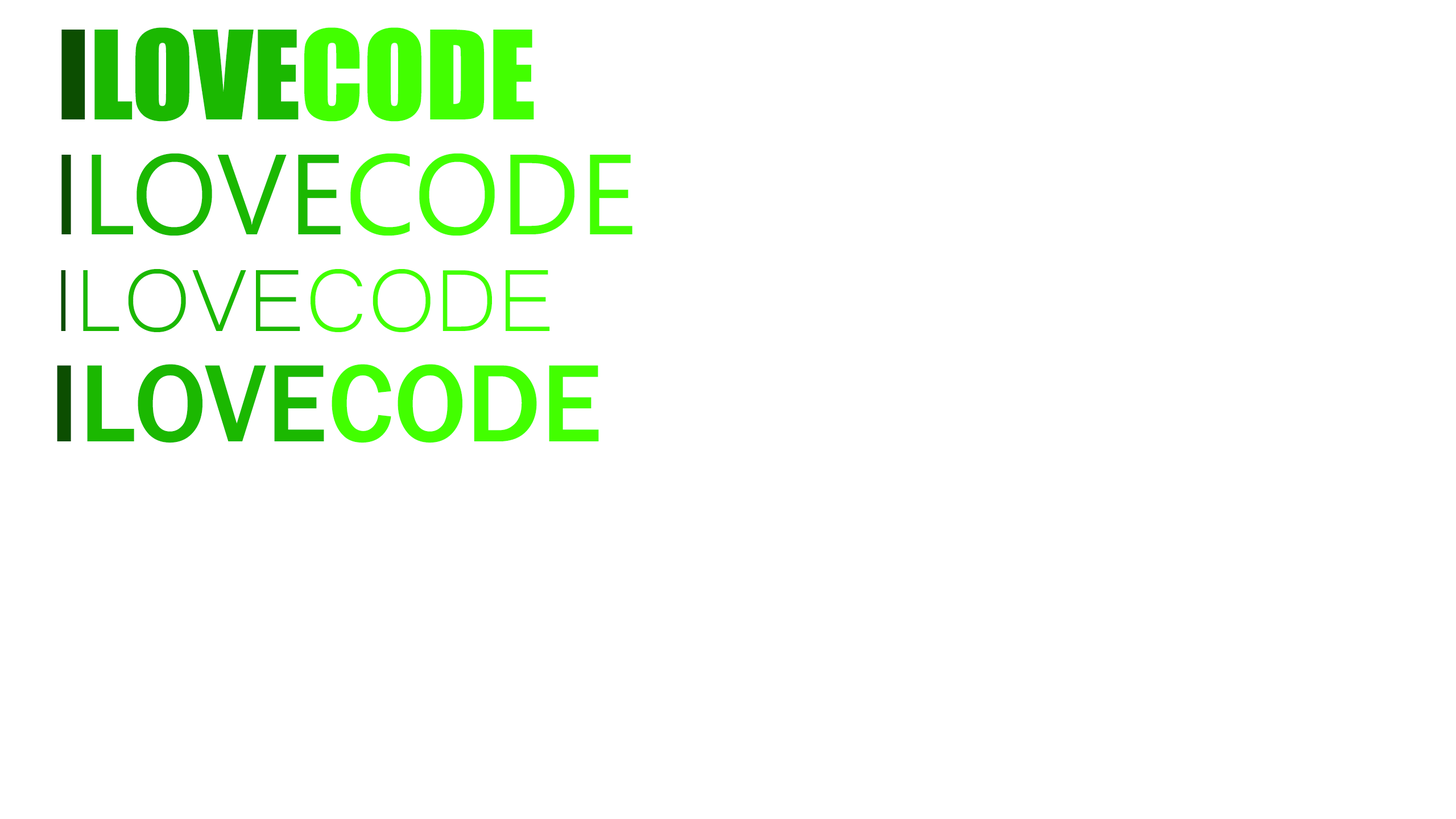
<style>
.page{position:relative;width:1456px;height:819px;background:#ffffff}
.page>*{position:absolute;margin:0}
.t1{font:113.7px "Impact";color:#1bb801;text-transform:uppercase}
.t2{font:113.7px "Impact";color:#0c4e01;text-transform:uppercase}
.t3{font:113.7px "Impact";color:#42ff00;text-transform:uppercase}
.t4{font:113.7px "NirmalaUI";color:#1bb801;text-transform:uppercase}
.t5{font:113.7px "NirmalaUI";color:#0c4e01;text-transform:uppercase}
.t6{font:113.7px "NirmalaUI";color:#42ff00;text-transform:uppercase}
.t7{font:113.7px "Microsoft-Yi-Baiti";color:#1bb801;text-transform:uppercase}
.t8{font:113.7px "Microsoft-Yi-Baiti";color:#0c4e01;text-transform:uppercase}
.t9{font:113.7px "Microsoft-Yi-Baiti";color:#42ff00;text-transform:uppercase}
.t10{font:113.7px "FranklinGothic-Medium";color:#1bb801;text-transform:uppercase}
.t11{font:113.7px "FranklinGothic-Medium";color:#0c4e01;text-transform:uppercase}
.t12{font:113.7px "FranklinGothic-Medium";color:#42ff00;text-transform:uppercase}
</style>
<div class="page">
<p class="t1" style="left:61px;top:27px;width:473px;height:95px"><span class="t2">I</span>Love<span class="t3">Code</span></p>
<p class="t4" style="left:61px;top:153px;width:571px;height:83px"><span class="t5">I</span>Love<span class="t6">Code</span></p>
<p class="t7" style="left:61px;top:269px;width:489px;height:63px"><span class="t8">I</span>Love<span class="t9">Code</span></p>
<p class="t10" style="left:57px;top:364px;width:542px;height:79px"><span class="t11">I</span>Love<span class="t12">Code</span></p>
</div>
